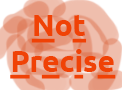
<style>
.page{position:relative;width:122px;height:90px;background:#efbead}
.page>*{position:absolute;margin:0}
.t1{font:30px "Ubuntu-Bold";color:#f04206;text-decoration:underline}
.t2{font:30px "Ubuntu-Bold";color:#d75d33}
.t3{font:30px "Ubuntu-Bold";color:#f04206}
</style>
<div class="page">
<p class="t1" style="left:10px;top:15px;width:106px;height:64px"><span class="t2">   </span>N<span class="t3">o</span>t<br>P<span class="t3">r</span>e<span class="t3">c</span>i<span class="t3">s</span>e</p>
</div>
